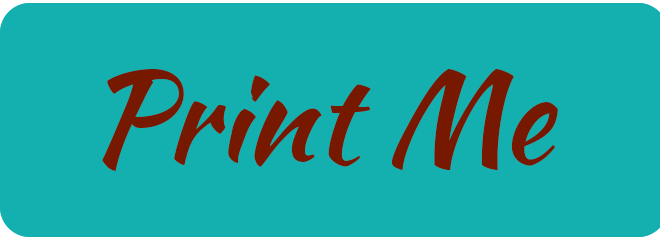
<style>
.page{position:relative;width:660px;height:240px;background:#14b0b0}
.page>*{position:absolute;margin:0}
.t1{font:125px "KaushanScript-Regular";color:#771800}
</style>
<div class="page">
<p class="t1" style="left:102px;top:69px;width:456px;height:103px">Print Me</p>
</div>
